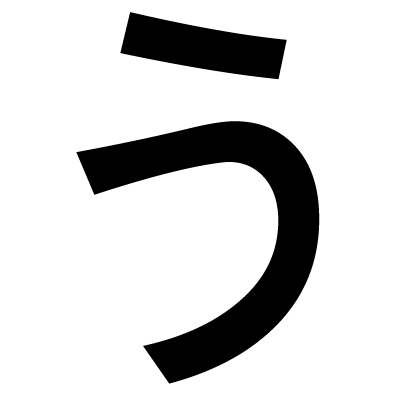
<style>
.page{position:relative;width:400px;height:400px;background:#ffffff}
.page>*{position:absolute;margin:0}
.t1{font:416.7px "MS-PGothic";color:#000000}
</style>
<div class="page">
<p class="t1" style="left:76px;top:12px;width:244px;height:372px">う</p>
</div>
